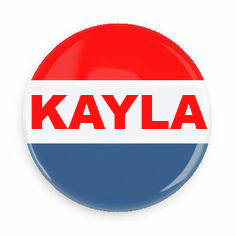
<style>
.page{position:relative;width:236px;height:236px;background:#fefefe}
.page>*{position:absolute;margin:0}
.t1{font:48px "Arial-Black";color:#fd1312}
</style>
<div class="page">
<p class="t1" style="left:31px;top:95px;width:177px;height:34px">KAYLA</p>
</div>
